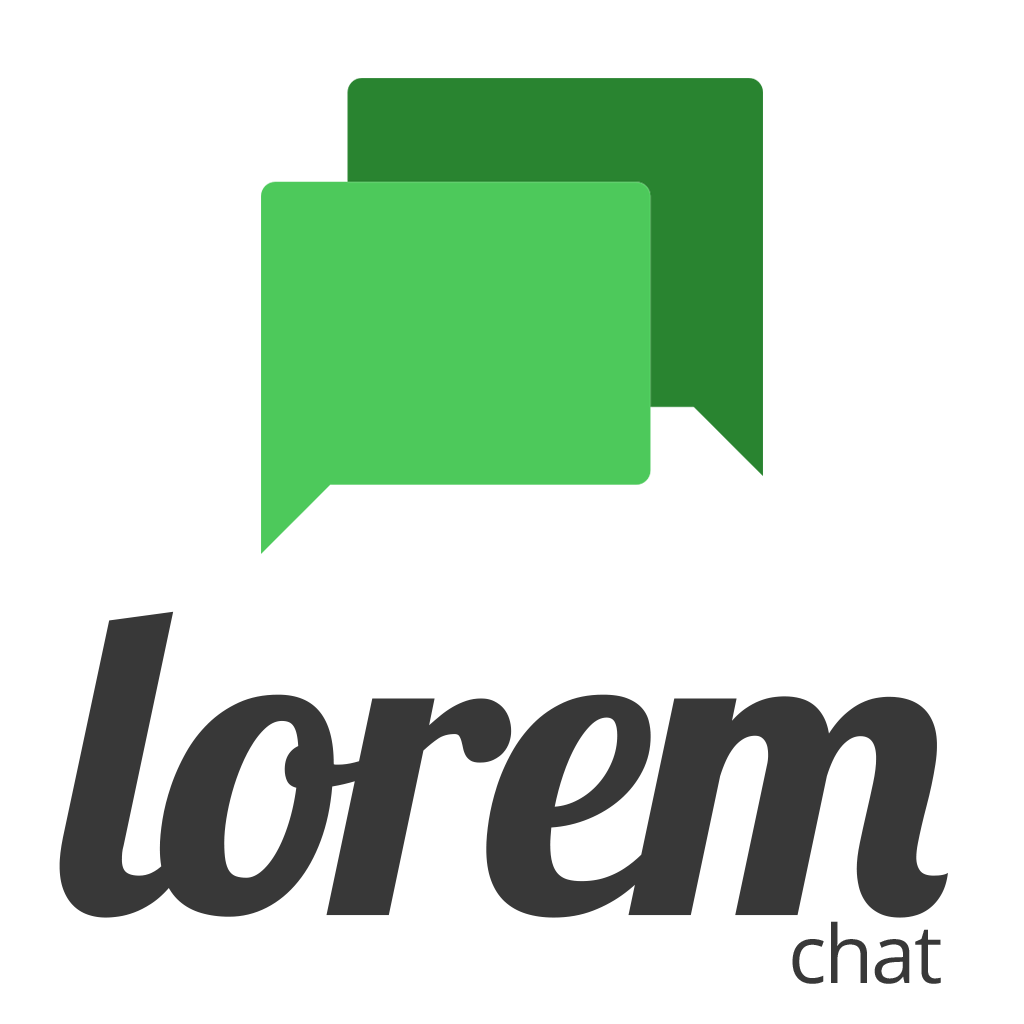
<style>
.page{position:relative;width:1024px;height:1024px;background:#ffffff}
.page>*{position:absolute;margin:0}
.t1{font:432.7px "Lobster-Regular";letter-spacing:-0.03em;color:#383838}
.t2{font:80.7px "OpenSans";letter-spacing:-0.03em;color:#383838}
</style>
<div class="page">
<p class="t1" style="left:59px;top:611px;width:889px;height:307px">lorem</p>
<p class="t2" style="left:792px;top:921px;width:149px;height:63px">chat</p>
</div>
